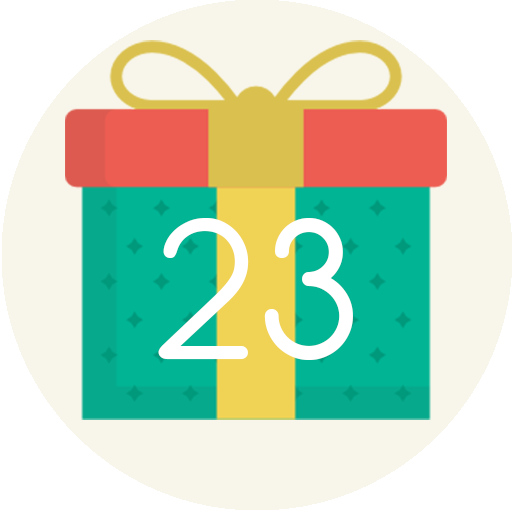
<style>
.page{position:relative;width:512px;height:512px;background:#f8f6ea}
.page>*{position:absolute;margin:0}
.t1{font:220.4px "Antipasto";color:#ffffff}
</style>
<div class="page">
<p class="t1" style="left:158px;top:218px;width:195px;height:142px">23</p>
</div>
